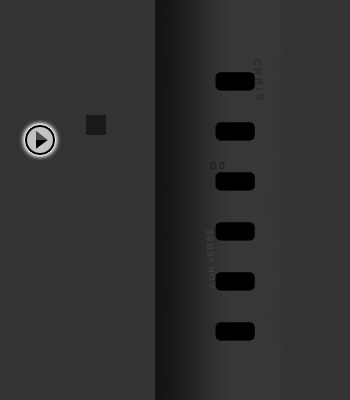
<style>
.page{position:relative;width:350px;height:400px;background:#333333}
.page>*{position:absolute;margin:0}
.t1{font:10px "ArialMT";letter-spacing:0.28em;color:#1e1e1e}
.t2{font:8px "ArialMT";letter-spacing:0.28em;color:#3e3e3f}
</style>
<div class="page">
<p class="t1" style="left:210px;top:162px;width:15px;height:7px">00</p>
<p class="t2" style="left:205px;top:228px;width:11px;height:60px;rotate:-94deg">CONVERSE</p>
</div>
